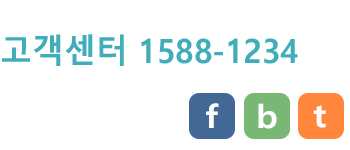
<style>
.page{position:relative;width:350px;height:150px;background:#ffffff}
.page>*{position:absolute;margin:0}
.t1{font:33.6px "MalgunGothicBold";letter-spacing:-0.005em;color:#40adba;scale:0.95 1}
.t2{font:32px "MalgunGothicBold";letter-spacing:-0.005em;color:#fefefe;scale:1.1 1}
</style>
<div class="page">
<p class="t1" style="left:2px;top:34px;width:296px;height:32px">고객센터 1588-1234</p>
<p class="t2" style="left:206px;top:103px;width:13px;height:25px">f</p>
<p class="t2" style="left:258px;top:103px;width:19px;height:26px">b</p>
<p class="t2" style="left:313px;top:105px;width:13px;height:23px">t</p>
</div>
